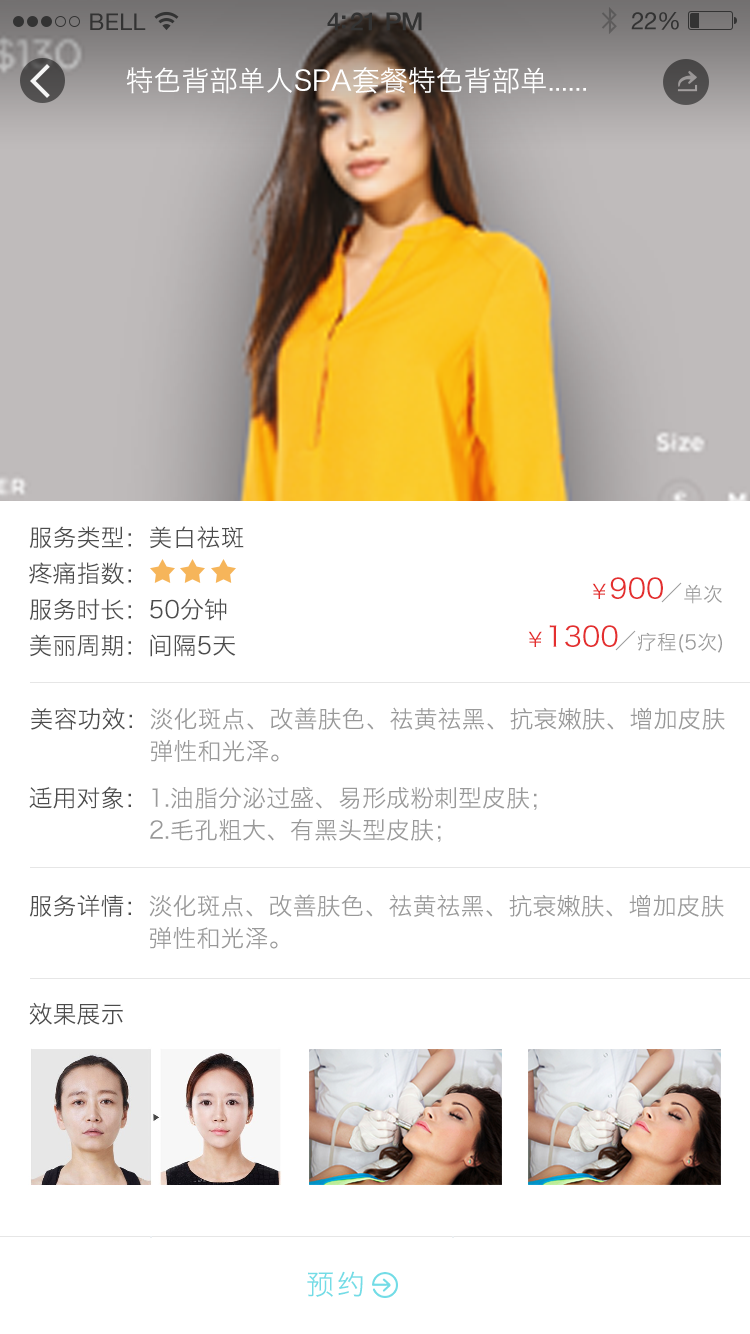
<style>
.page{position:relative;width:750px;height:1334px;background:#ffffff}
.page>*{position:absolute;margin:0}
.t1{font:28px "HiraginoSansGB-W3";color:#ffffff}
.t2{font:24px/36px "HiraginoSansGB-W3";color:#4c4c4c}
.t3{font:28px "HiraginoSansGB-W3";color:#e42f2f}
.t4{font:20px "HiraginoSansGB-W3";color:#999999}
.t5{font:20px "HiraginoSansGB-W3";color:#e42f2f}
.t6{font:24px/32px "HiraginoSansGB-W3";color:#999999}
.t7{font:24px/32px "HiraginoSansGB-W3";color:#4c4c4c}
.t8{font:24px "HiraginoSansGB-W3";color:#4c4c4c}
.t9{font:28px "HiraginoSansGB-W3";letter-spacing:0.1em;color:#73dce6}
</style>
<div class="page">
<p class="t1" style="left:126px;top:67px;width:460px;height:27px">特色背部单人SPA套餐特色背部单......</p>
<p class="t2" style="left:29px;top:526px;width:215px;height:131px;text-align:justify">服务类型：美白祛斑<br>疼痛指数：<br>服务时长：50分钟<br>美丽周期：间隔5天</p>
<p class="t3" style="left:592px;top:577px;width:71px;height:22px"><span class="t4">                                        </span><span class="t5">￥</span>900</p>
<p class="t4" style="left:684px;top:584px;width:38px;height:20px">单次</p>
<p class="t3" style="left:528px;top:625px;width:90px;height:22px"><span class="t4">                                        </span><span class="t5">￥</span>1300</p>
<p class="t4" style="left:637px;top:632px;width:85px;height:21px">疗程(5次)</p>
<p class="t6" style="left:31px;top:707px;width:694px;height:55px;text-align:justify"><span class="t7">美容功效：</span>淡化斑点、改善肤色、祛黄祛黑、抗衰嫩肤、增加皮肤<br>               弹性和光泽。</p>
<p class="t6" style="left:29px;top:786px;width:508px;height:56px;text-align:justify"><span class="t7">适用对象：</span>1.油脂分泌过盛、易形成粉刺型皮肤；<br>               2.毛孔粗大、有黑头型皮肤；</p>
<p class="t6" style="left:29px;top:894px;width:695px;height:55px;text-align:justify"><span class="t7">服务详情：</span>淡化斑点、改善肤色、祛黄祛黑、抗衰嫩肤、增加皮肤<br>               弹性和光泽。</p>
<p class="t8" style="left:29px;top:1002px;width:94px;height:23px">效果展示</p>
<p class="t9" style="left:307px;top:1271px;width:56px;height:26px">预约</p>
</div>
